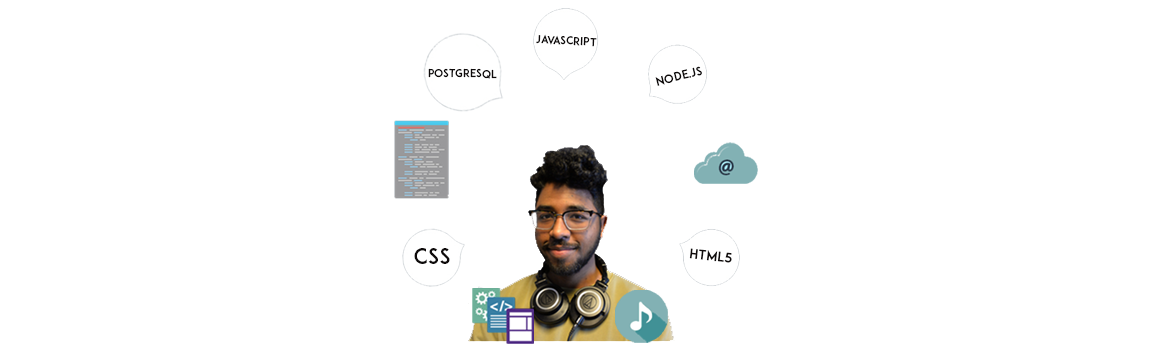
<style>
.page{position:relative;width:1170px;height:350px;background:#ffffff}
.page>*{position:absolute;margin:0}
.t1{font:10.7px "ADAM.CGPRO";letter-spacing:0.025em;color:#0e0a0a;text-transform:uppercase}
.t2{font:11.4px "ADAM.CGPRO";letter-spacing:0.025em;color:#0e0a0a;text-transform:uppercase}
.t3{font:21.4px "ADAM.CGPRO";letter-spacing:0.025em;color:#0e0a0a;text-transform:uppercase}
.t4{font:12.9px "ADAM.CGPRO";letter-spacing:0.025em;color:#0e0a0a;text-transform:uppercase}
</style>
<div class="page">
<p class="t1" style="left:536px;top:34px;width:61px;height:13px;rotate:3deg">Javascript</p>
<p class="t1" style="left:428px;top:68px;width:69px;height:11px;rotate:1deg">postgreSQL</p>
<p class="t2" style="left:655px;top:66px;width:47px;height:20px;rotate:-14deg">Node.JS</p>
<p class="t3" style="left:414px;top:248px;width:36px;height:16px">css</p>
<p class="t4" style="left:689px;top:248px;width:43px;height:15px;rotate:6deg">HTML5</p>
</div>
